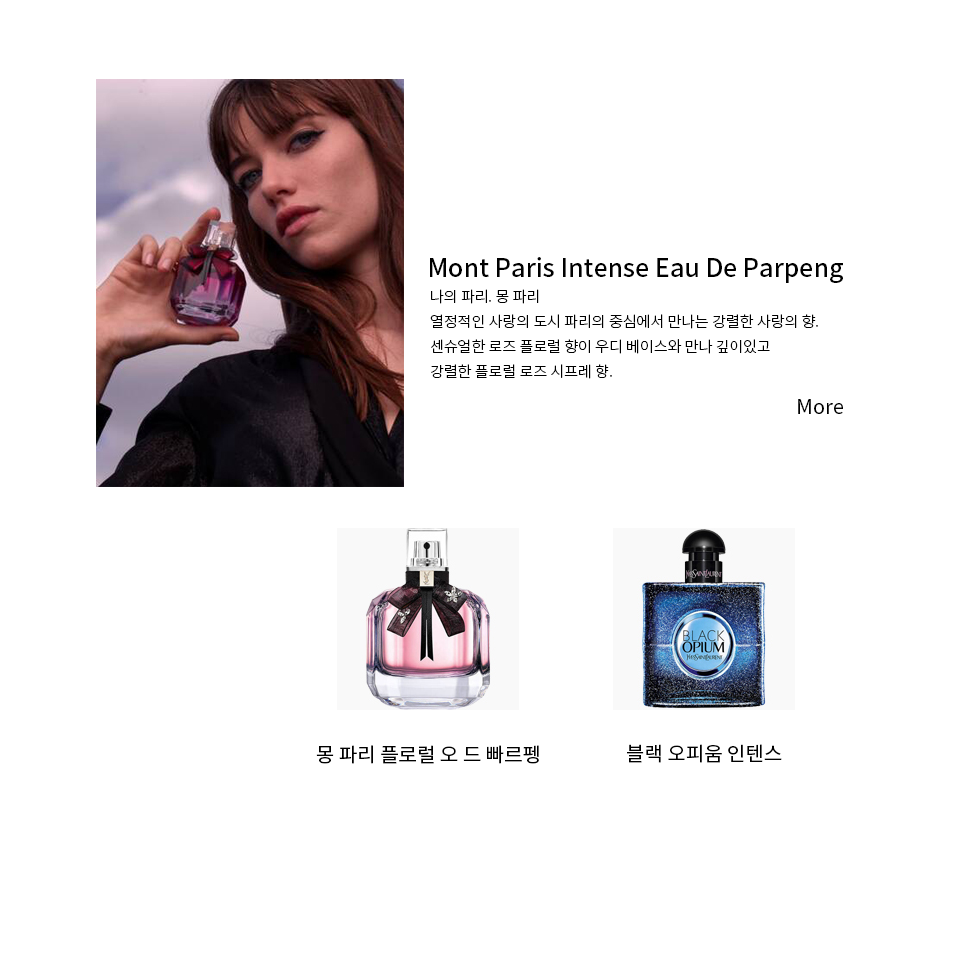
<style>
.page{position:relative;width:960px;height:974px;background:#ffffff}
.page>*{position:absolute;margin:0}
.t1{font:25px "NotoSansKR-Medium";color:#000000}
.t2{font:15px/25px "NotoSansKR-Light";color:#000000}
.t3{font:20px "NotoSansKR-Regular";color:#000000}
</style>
<div class="page">
<p class="t1" style="left:430px;top:257px;width:413px;height:26px">Mont Paris Intense Eau De Parpeng</p>
<p class="t2" style="left:430px;top:289px;width:388px;height:90px">나의 파리. 몽 파리<br>열정적인 사랑의 도시 파리의 중심에서 만나는 강렬한 사랑의 향.<br>센슈얼한 로즈 플로럴 향이 우디 베이스와 만나 깊이있고 <br>강렬한 플로럴 로즈 시프레 향.</p>
<p class="t3" style="left:798px;top:399px;width:45px;height:15px">More</p>
<p class="t3" style="left:316px;top:745px;width:223px;height:19px">몽 파리 플로럴 오 드 빠르펭</p>
<p class="t3" style="left:627px;top:744px;width:155px;height:19px">블랙 오피움 인텐스</p>
</div>
